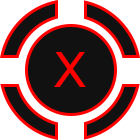
<style>
.page{position:relative;width:140px;height:140px;background:#111111}
.page>*{position:absolute;margin:0}
.t1{font:48px "ArialMT";color:#ff0000}
</style>
<div class="page">
<p class="t1" style="left:54px;top:52px;width:32px;height:35px">X</p>
</div>
